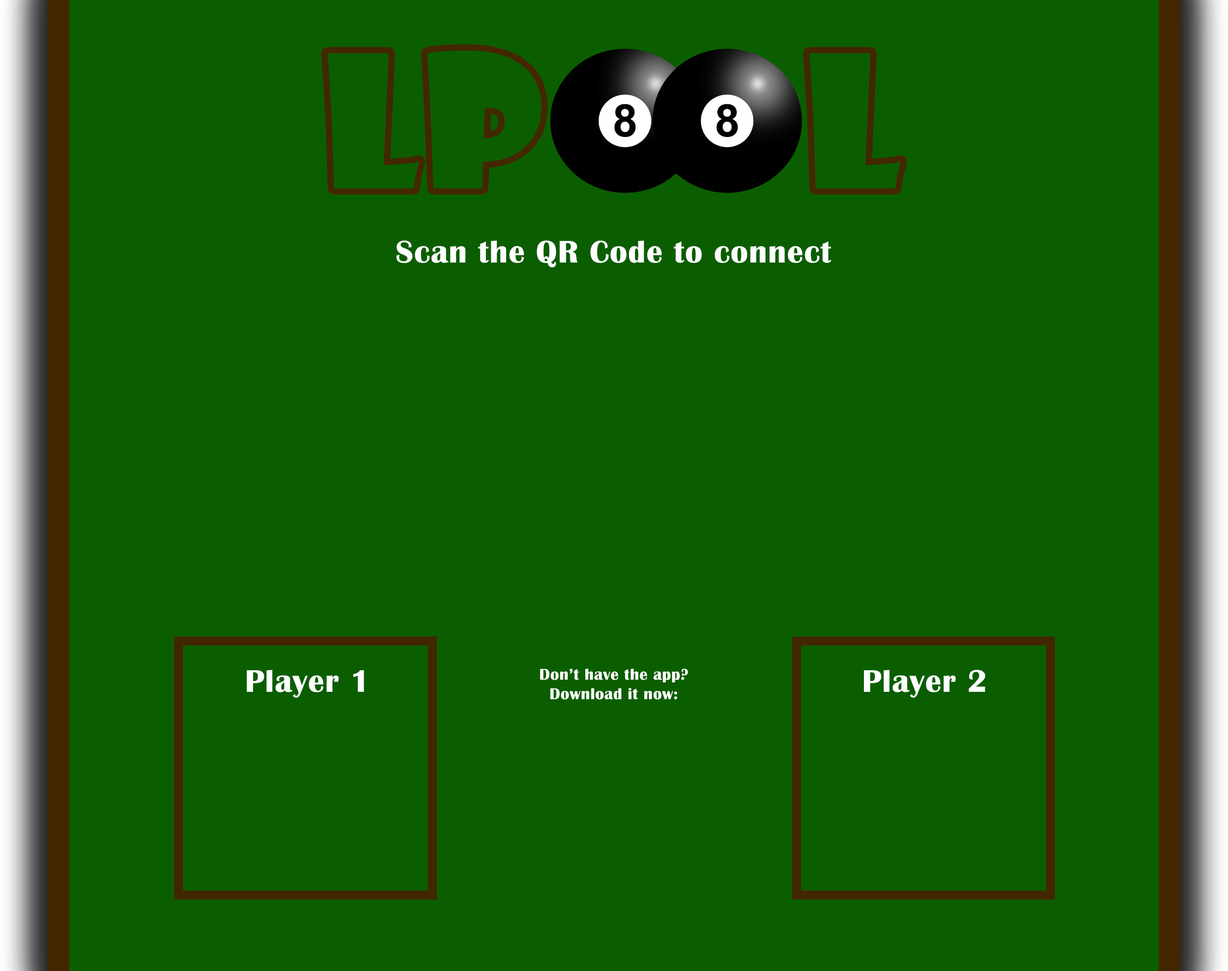
<style>
.page{position:relative;width:1228px;height:971px;background:#0b5e00}
.page>*{position:absolute;margin:0}
.t1{font:32.4px "BritannicBold";letter-spacing:0.025em;color:#ffffff}
.t2{font:16.2px "BritannicBold";letter-spacing:0.025em;color:#ffffff}
</style>
<div class="page">
<p class="t1" style="left:396px;top:240px;width:436px;height:27px">Scan the QR Code to connect</p>
<p class="t1" style="left:247px;top:670px;width:117px;height:28px">Player 1</p>
<p class="t2" style="left:540px;top:668px;width:148px;height:31px;text-align:center">Don’t have the app?<br>Download it now:</p>
<p class="t1" style="left:864px;top:670px;width:121px;height:28px">Player 2</p>
</div>
